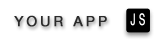
<style>
.page{position:relative;width:161px;height:42px;background:#ffffff}
.page>*{position:absolute;margin:0}
.t1{font:14px "HelveticaNeueLTPro-Roman";letter-spacing:0.2em;color:#2b2b2b;text-transform:uppercase;font-weight:bold}
</style>
<div class="page">
<p class="t1" style="left:14px;top:15px;width:93px;height:12px">Your APP</p>
</div>
